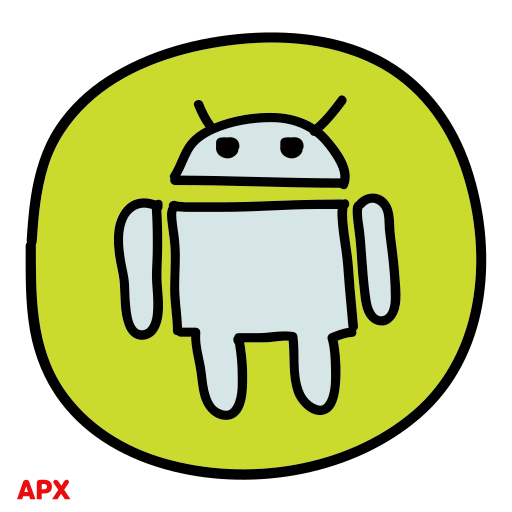
<style>
.page{position:relative;width:512px;height:512px;background:#cbdb2d}
.page>*{position:absolute;margin:0}
.t1{font:24px "Jalnan";color:#e90d0d}
</style>
<div class="page">
<p class="t1" style="left:17px;top:479px;width:54px;height:21px">APX</p>
</div>
